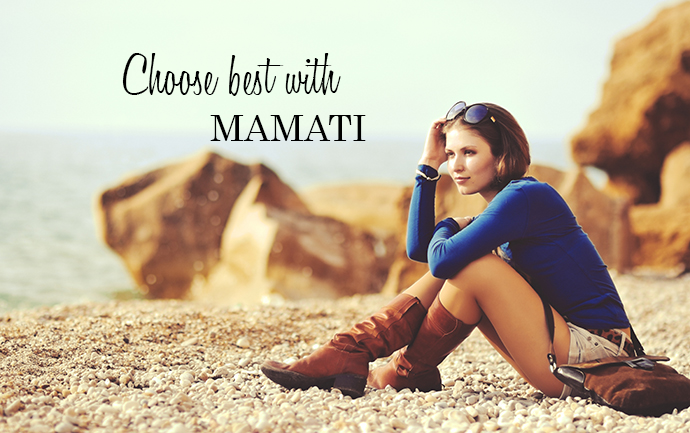
<style>
.page{position:relative;width:690px;height:433px}
.page>*{position:absolute;margin:0}
.t1{font:60px "HoneyScript-Light";color:#000000}
.t2{font:36px "Century";color:#000000}
</style>
<div class="page">
<p class="t1" style="left:122px;top:53px;width:219px;height:43px">Choose best with</p>
<p class="t2" style="left:210px;top:115px;width:156px;height:26px">MAMATI</p>
</div>
